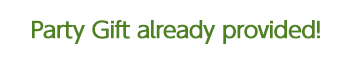
<style>
.page{position:relative;width:349px;height:63px;background:#ffffff}
.page>*{position:absolute;margin:0}
.t1{font:22px "UDShinGoPro-Regular";letter-spacing:-0.04em;color:#4e8120;font-weight:bold}
</style>
<div class="page">
<p class="t1" style="left:32px;top:20px;width:288px;height:25px">Party Gift already provided!</p>
</div>
